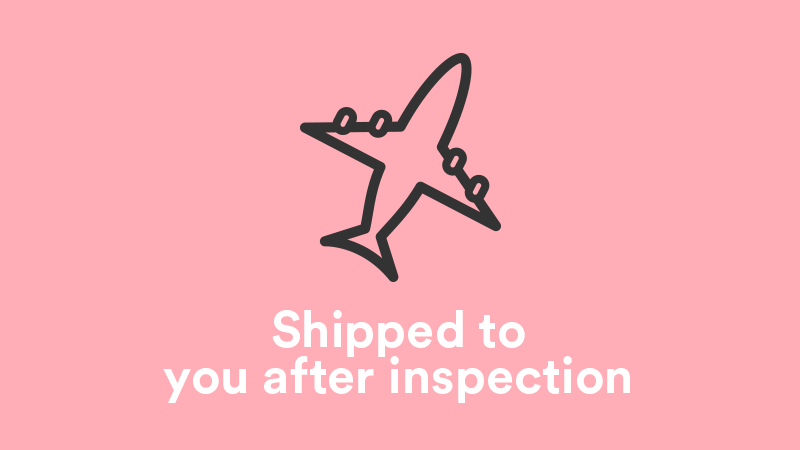
<style>
.page{position:relative;width:800px;height:450px;background:#ffadb6}
.page>*{position:absolute;margin:0}
.t1{font:50.7px/46.7px "CircularStd-Bold";color:#ffffff}
</style>
<div class="page">
<p class="t1" style="left:163px;top:310px;width:467px;height:93px;text-align:center">Shipped to<br>you after inspection</p>
</div>
